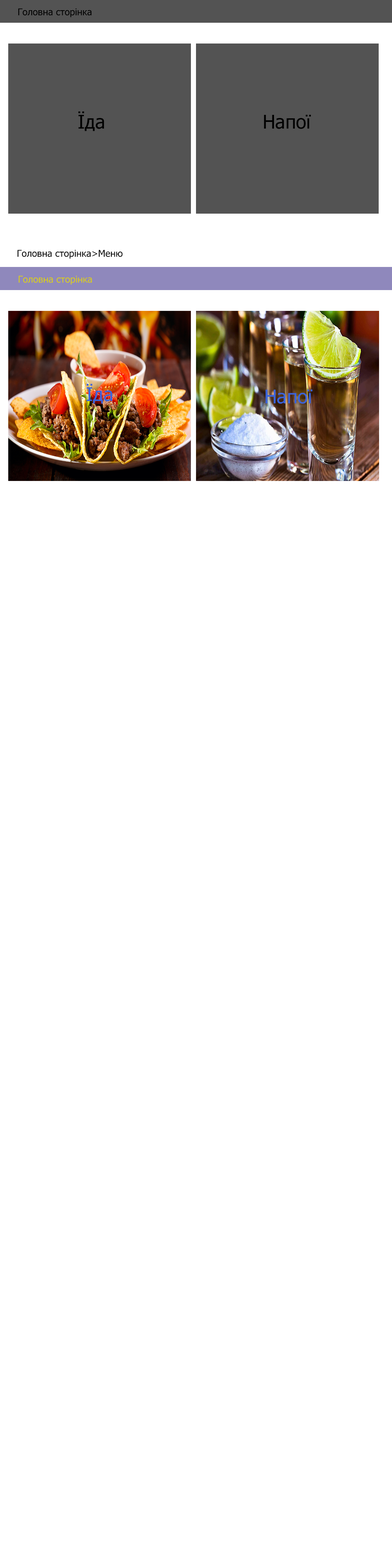
<style>
.page{position:relative;width:392px;height:1568px;background:#ffffff}
.page>*{position:absolute;margin:0}
.t1{font:9.4px "Tahoma";color:#000000}
.t2{font:18.8px "Tahoma";color:#000000}
.t3{font:9.4px "Tahoma";color:#d8cb19}
.t4{font:18.8px "Tahoma";color:#3a64db}
</style>
<div class="page">
<p class="t1" style="left:18px;top:8px;width:74px;height:9px">Головна сторінка</p>
<p class="t2" style="left:78px;top:111px;width:26px;height:20px">Їда</p>
<p class="t2" style="left:264px;top:114px;width:47px;height:15px">Напої</p>
<p class="t1" style="left:17px;top:250px;width:106px;height:9px">Головна сторінка&gt;Меню</p>
<p class="t3" style="left:18px;top:276px;width:74px;height:9px">Головна сторінка</p>
<p class="t4" style="left:87px;top:384px;width:26px;height:20px">Їда</p>
<p class="t4" style="left:265px;top:389px;width:47px;height:15px">Напої</p>
</div>
